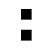
<style>
.page{position:relative;width:50px;height:50px;background:#ffffff}
.page>*{position:absolute;margin:0}
.t1{font:55px "Typo_SsangmunDong_B";color:#000000;scale:1.09 1}
.t2{font:50px "Typo_SsangmunDong_B";color:#000000}
</style>
<div class="page">
<p class="t1" style="left:18px;top:7px;width:14px;height:36px">:</p>
<p class="t2" style="left:21px;top:9px;width:11px;height:32px">:</p>
</div>
